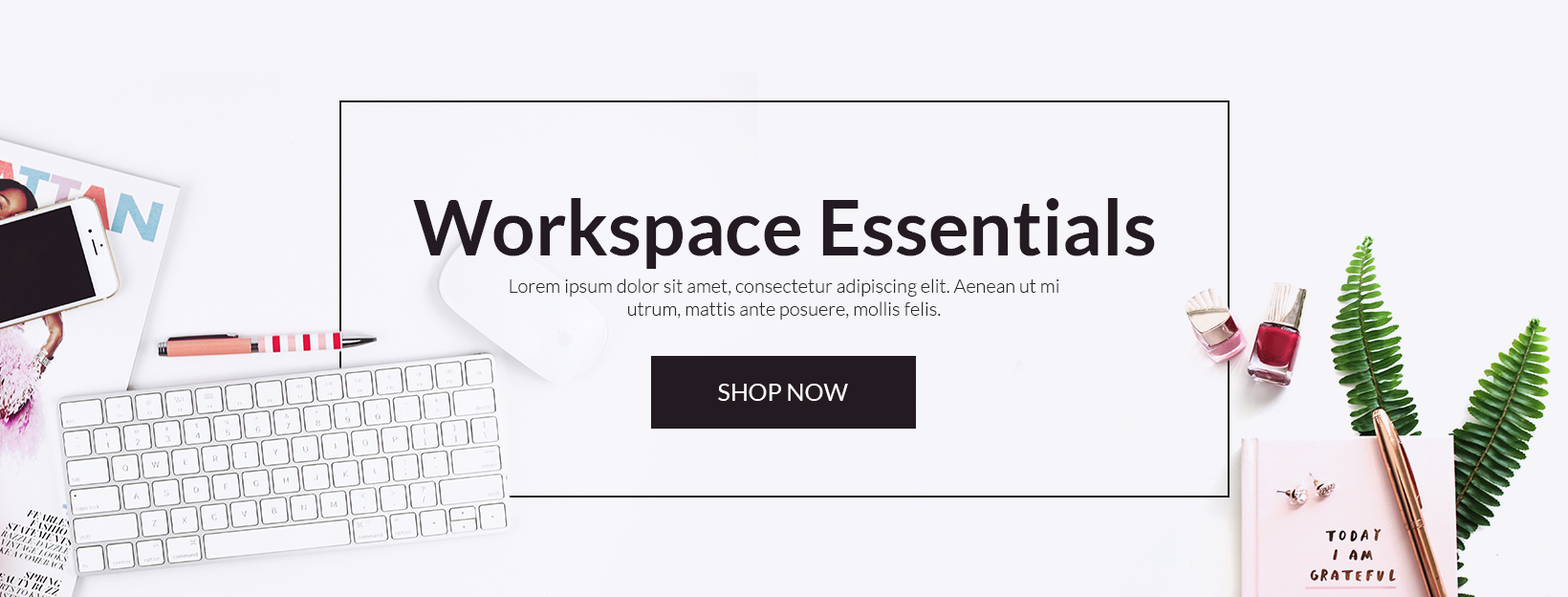
<style>
.page{position:relative;width:1568px;height:597px;background:#f6f5fa}
.page>*{position:absolute;margin:0}
.t1{font:76.5px "Lato-Bold";color:#241b22}
.t2{font:19.1px "Lato-Light";color:#2b2729}
.t3{font:23.9px "Lato-Regular";color:#ffffff}
</style>
<div class="page">
<p class="t1" style="left:413px;top:198px;width:742px;height:71px">Workspace Essentials</p>
<p class="t2" style="left:510px;top:278px;width:549px;height:41px;text-align:center">Lorem ipsum dolor sit amet, consectetur adipiscing elit. Aenean ut mi<br>utrum, mattis ante posuere, mollis felis.</p>
<p class="t3" style="left:718px;top:383px;width:130px;height:18px">SHOP NOW</p>
</div>
